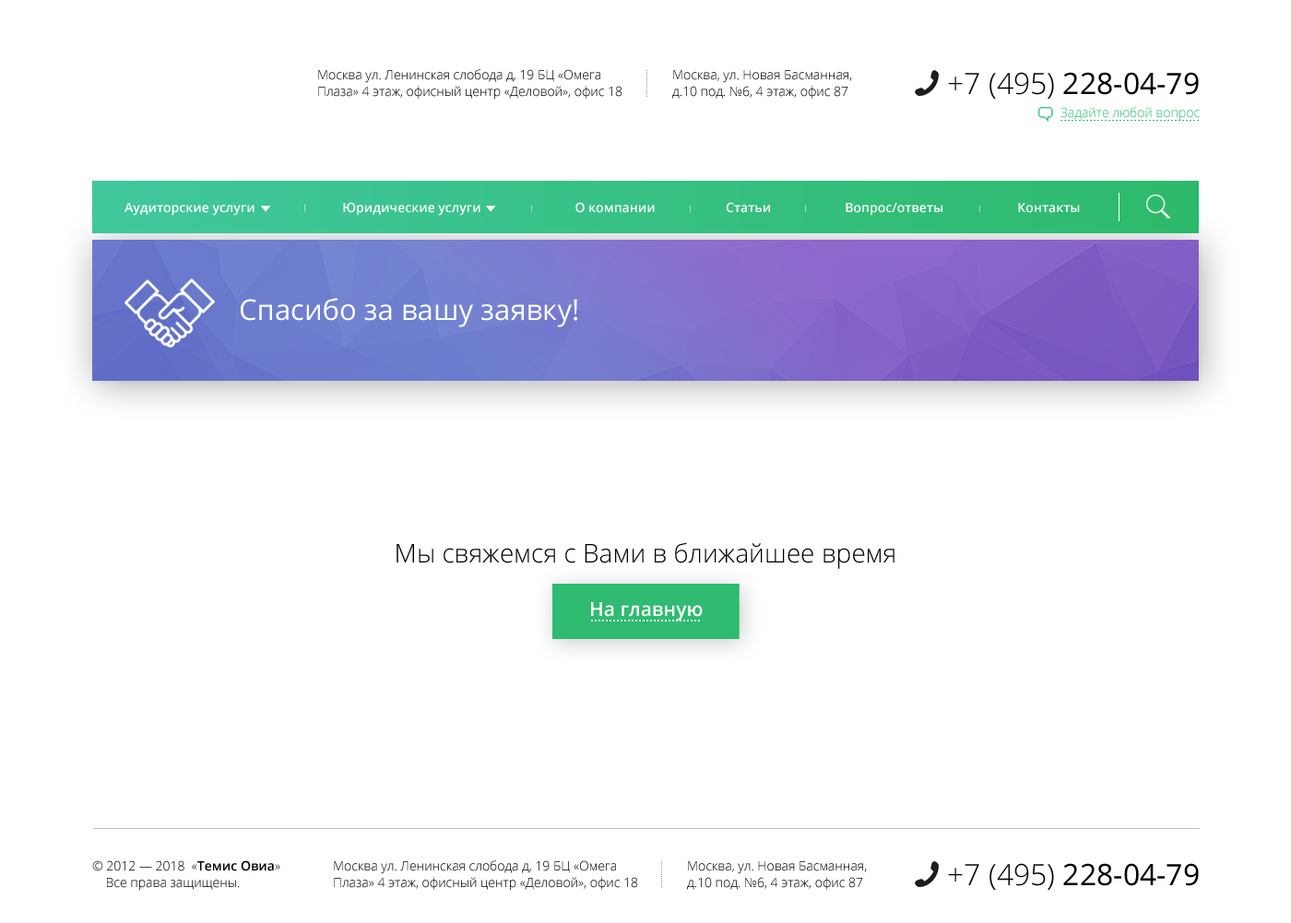
<style>
.page{position:relative;width:1291px;height:923px;background:#ffffff}
.page>*{position:absolute;margin:0}
.t1{font:12.9px/16.6px "OpenSans-Light";color:#000000}
.t2{font:29.5px "OpenSans";color:#000000}
.t3{font:29.5px "OpenSans-Light";color:#000000}
.t4{font:12.9px "OpenSans-Light";color:#31bd76}
.t5{font:12.9px "OpenSans-Semibold";color:#ffffff}
.t6{font:28.6px "OpenSans";color:#ffffff}
.t7{font:25.8px "OpenSans-Light";color:#000000}
.t8{font:19.4px "OpenSans-Semibold";color:#ffffff}
.t9{font:12.9px/16.6px "OpenSans-Semibold";color:#000000}
</style>
<div class="page">
<p class="t1" style="left:318px;top:69px;width:305px;height:31px">Москва ул. Ленинская слобода д, 19 БЦ «Омега <br>Плаза» 4 этаж, офисный центр «Деловой», офис 18</p>
<p class="t1" style="left:672px;top:70px;width:180px;height:30px">Москва, ул. Новая Басманная, <br>д.10 под. №6, 4 этаж, офис 87</p>
<p class="t2" style="left:948px;top:72px;width:251px;height:27px"><span class="t3">+7 (495) </span>228-04-79</p>
<p class="t4" style="left:1061px;top:107px;width:139px;height:14px">Задайте любой вопрос</p>
<p class="t5" style="left:125px;top:202px;width:955px;height:14px">Аудиторские услуги                          Юридические услуги                            О компании                     Статьи                      Вопрос/ответы                      Контакты</p>
<p class="t6" style="left:241px;top:298px;width:336px;height:29px">Спасибо за вашу заявку!</p>
<p class="t7" style="left:397px;top:542px;width:498px;height:27px">Мы свяжемся с Вами в ближайшее время</p>
<p class="t8" style="left:591px;top:602px;width:112px;height:19px">На главную</p>
<p class="t1" style="left:92px;top:861px;width:188px;height:30px">© 2012 — 2018  «<span class="t9">Темис Овиа</span>» <br>    Все права защищены.</p>
<p class="t1" style="left:334px;top:861px;width:304px;height:30px">Москва ул. Ленинская слобода д, 19 БЦ «Омега <br>Плаза» 4 этаж, офисный центр «Деловой», офис 18</p>
<p class="t1" style="left:687px;top:862px;width:180px;height:29px">Москва, ул. Новая Басманная, <br>д.10 под. №6, 4 этаж, офис 87</p>
<p class="t2" style="left:948px;top:863px;width:251px;height:27px"><span class="t3">+7 (495) </span>228-04-79</p>
</div>
